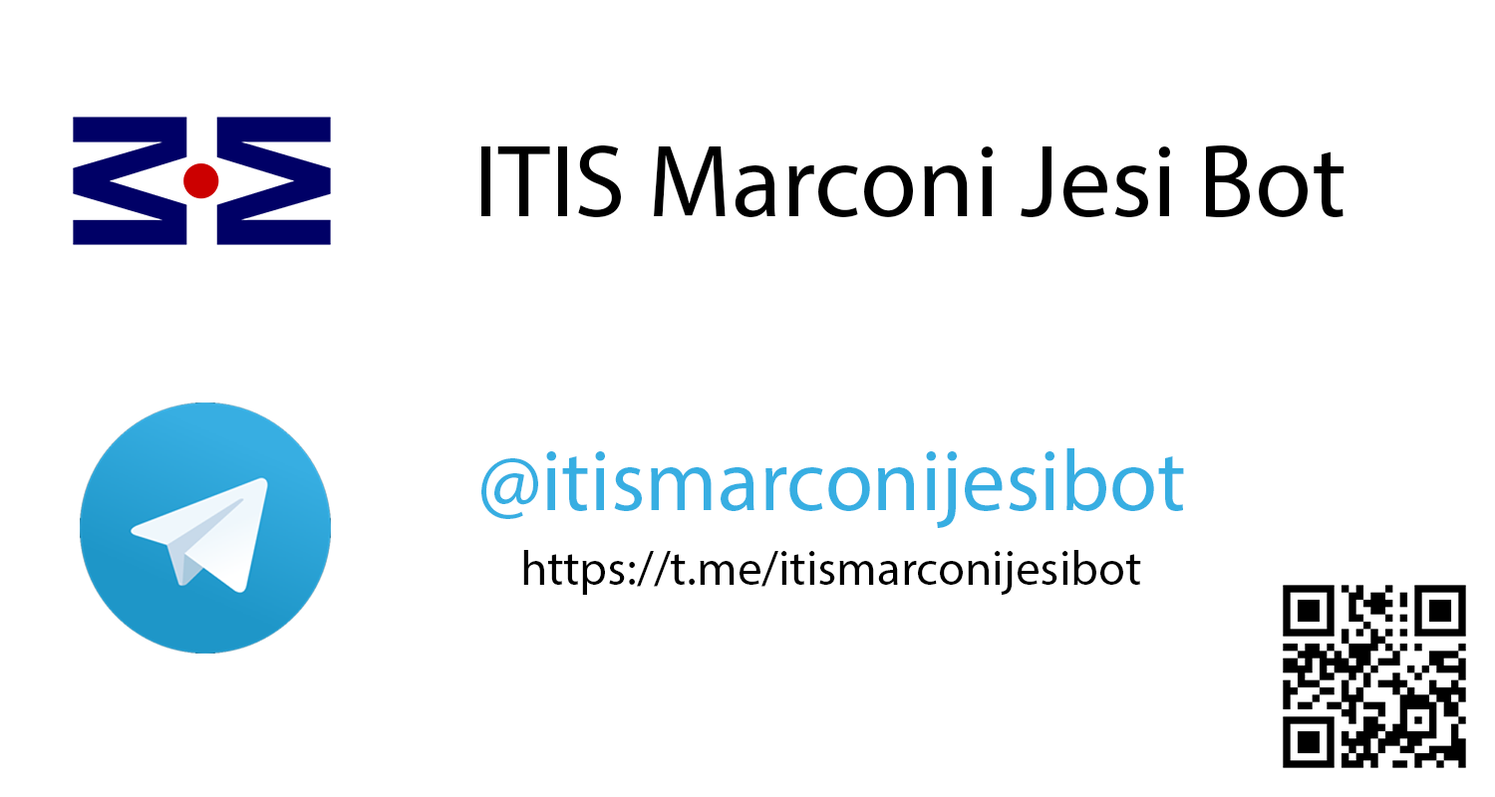
<style>
.page{position:relative;width:1495px;height:797px;background:#ffffff}
.page>*{position:absolute;margin:0}
.t1{font:103.7px "MyriadPro-Regular";color:#000000}
.t2{font:86.7px "MyriadPro-Regular";color:#37aee2}
.t3{font:48.8px "MyriadPro-Regular";color:#000000}
</style>
<div class="page">
<p class="t1" style="left:481px;top:146px;width:864px;height:72px">ITIS Marconi Jesi Bot</p>
<p class="t2" style="left:481px;top:449px;width:703px;height:79px">@itismarconijesibot</p>
<p class="t3" style="left:523px;top:550px;width:618px;height:45px">https://t.me/itismarconijesibot</p>
</div>
